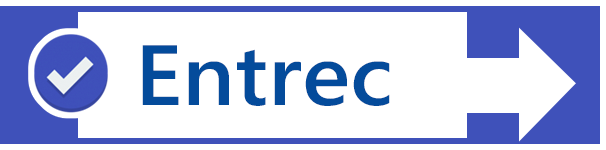
<style>
.page{position:relative;width:606px;height:150px;background:#ffffff}
.page>*{position:absolute;margin:0}
.t1{font:85.4px "YuGothicUI-Bold";color:#044b9b;scale:1.06 1}
</style>
<div class="page">
<p class="t1" style="left:142px;top:45px;width:248px;height:61px">Entrec</p>
</div>
